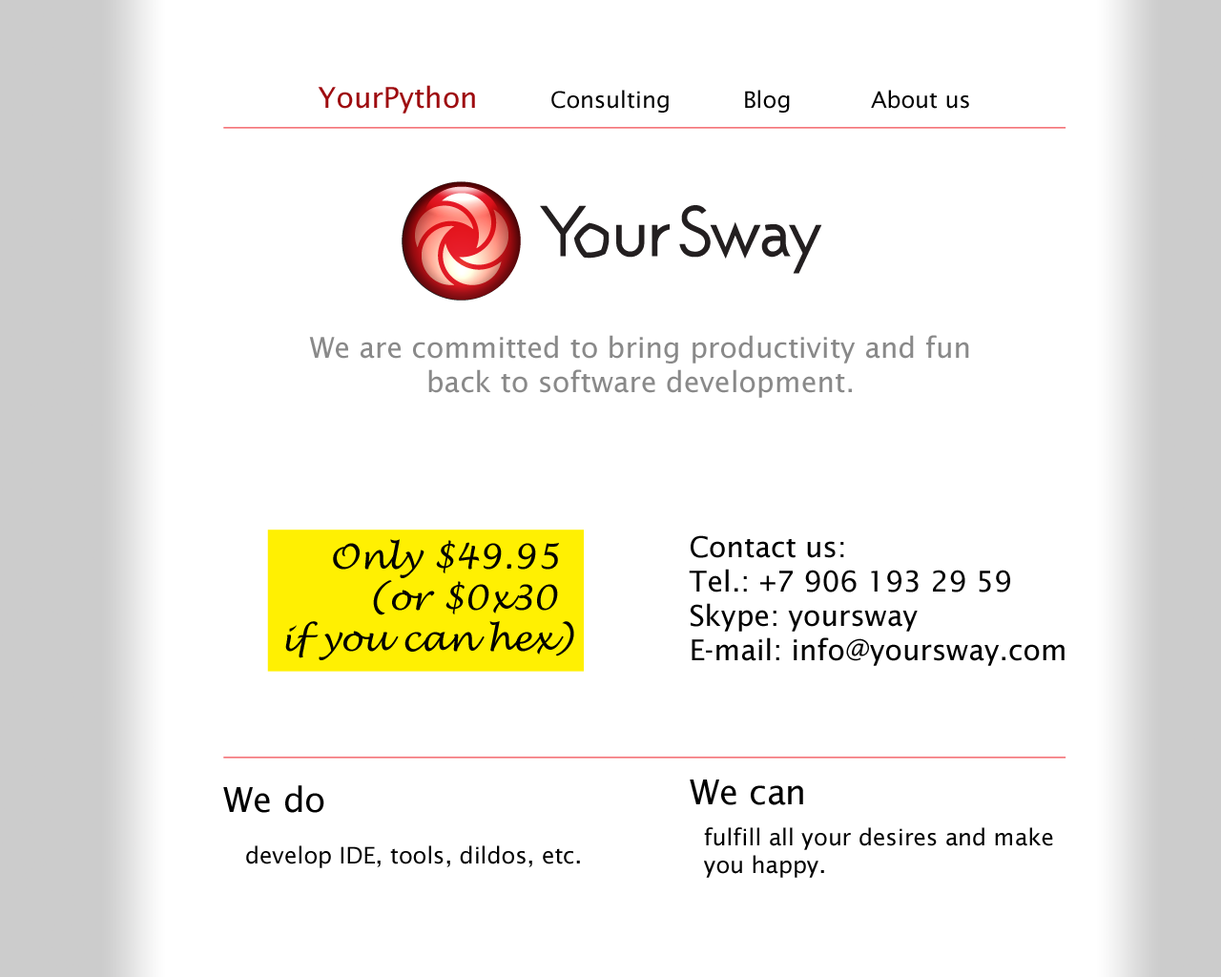
<style>
.page{position:relative;width:1221px;height:977px;background:#ffffff}
.page>*{position:absolute;margin:0}
.t1{font:22.9px "LucidaSans";color:#000000}
.t2{font:28.6px "LucidaSans";color:#9e0b0f}
.t3{font:28.6px "LucidaSans";color:#898989}
.t4{font:34.3px "LucidaHandwriting-Italic";color:#000000}
.t5{font:28.6px "LucidaSans";color:#000000}
.t6{font:34.3px "LucidaSans";color:#000000}
</style>
<div class="page">
<p class="t1" style="left:318px;top:85px;width:651px;height:29px"><span class="t2">YourPython        </span>Consulting          Blog           About us</p>
<p class="t3" style="left:309px;top:335px;width:660px;height:63px;text-align:center">We are committed to bring productivity and fun back to software development.</p>
<p class="t4" style="left:285px;top:539px;width:289px;height:121px;text-align:center">Only $49.95<br>      (or $0x30<br>if you can hex)</p>
<p class="t5" style="left:689px;top:535px;width:375px;height:131px">Contact us:<br>Tel.: +7 906 193 29 59<br>Skype: yoursway<br>E-mail: info@yoursway.com</p>
<p class="t6" style="left:223px;top:785px;width:101px;height:28px">We do</p>
<p class="t6" style="left:690px;top:779px;width:113px;height:26px">We can</p>
<p class="t1" style="left:704px;top:827px;width:349px;height:51px">fulfill all your desires and make you happy.</p>
<p class="t1" style="left:246px;top:845px;width:334px;height:23px">develop IDE, tools, dildos, etc.</p>
</div>
